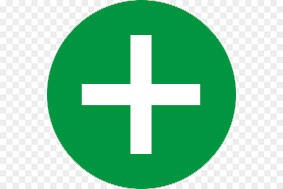
<style>
.page{position:relative;width:283px;height:189px;background:#009640}
.page>*{position:absolute;margin:0}
.t1{font:250px "ArialMT";letter-spacing:0.025em;color:#ffffff}
</style>
<div class="page">
<p class="t1" style="left:81px;top:35px;width:120px;height:119px">+</p>
</div>
